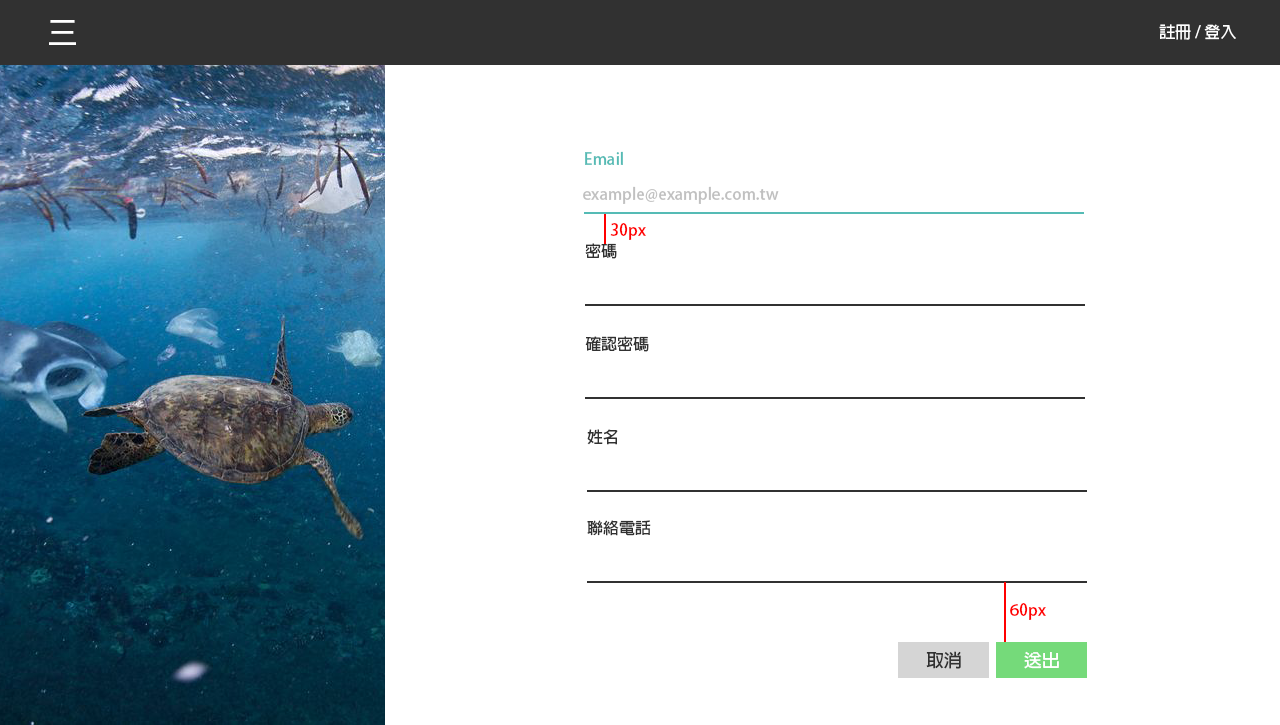
<style>
.page{position:relative;width:1280px;height:725px;background:#ffffff}
.page>*{position:absolute;margin:0}
.t1{font:30px "AdobeFanHeitiStd-Bold";color:#ffffff}
.t2{font:16px "AdobeFanHeitiStd-Bold";color:#ffffff}
.t3{font:16px "AdobeFanHeitiStd-Bold";color:#55bbb5}
.t4{font:16px "AdobeFanHeitiStd-Bold";color:#c0c0c0}
.t5{font:16px "AdobeFanHeitiStd-Bold";color:#ff0000}
.t6{font:16px "AdobeFanHeitiStd-Bold";color:#313131}
.t7{font:18px "AdobeFanHeitiStd-Bold";color:#313131}
.t8{font:18px "AdobeFanHeitiStd-Bold";color:#ffffff}
</style>
<div class="page">
<p class="t1" style="left:49px;top:20px;width:27px;height:25px">三</p>
<p class="t2" style="left:1159px;top:24px;width:77px;height:16px">註冊 / 登入</p>
<p class="t3" style="left:585px;top:151px;width:38px;height:14px">Email</p>
<p class="t4" style="left:583px;top:186px;width:196px;height:18px">example@example.com.tw</p>
<p class="t5" style="left:610px;top:223px;width:36px;height:17px">30px</p>
<p class="t6" style="left:585px;top:243px;width:32px;height:16px">密碼</p>
<p class="t6" style="left:585px;top:336px;width:64px;height:16px">確認密碼</p>
<p class="t6" style="left:587px;top:429px;width:31px;height:16px">姓名</p>
<p class="t6" style="left:587px;top:520px;width:64px;height:16px">聯絡電話</p>
<p class="t5" style="left:1010px;top:603px;width:36px;height:17px">60px</p>
<p class="t7" style="left:926px;top:651px;width:35px;height:18px">取消</p>
<p class="t8" style="left:1024px;top:651px;width:35px;height:18px">送出</p>
</div>
